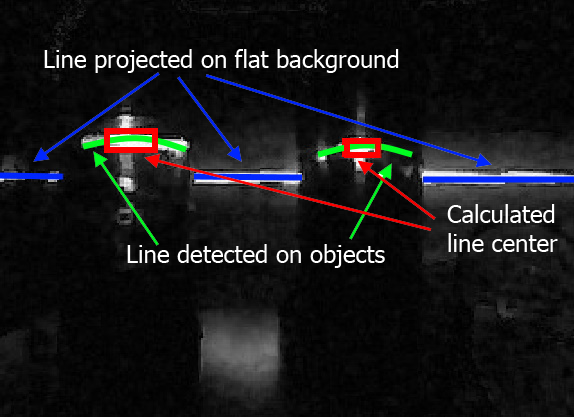
<style>
.page{position:relative;width:574px;height:417px}
.page>*{position:absolute;margin:0}
.t1{font:24px "Tahoma";color:#ffffff}
</style>
<div class="page">
<p class="t1" style="left:44px;top:49px;width:355px;height:24px">Line projected on flat background</p>
<p class="t1" style="left:447px;top:204px;width:111px;height:48px">Calculated <br>line center</p>
<p class="t1" style="left:127px;top:244px;width:258px;height:24px">Line detected on objects</p>
</div>
